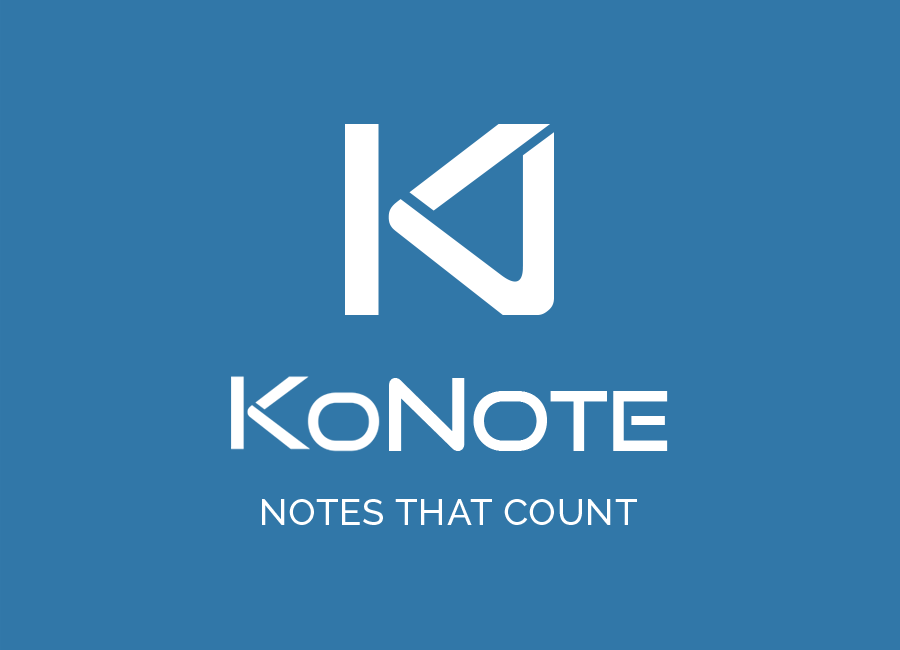
<style>
.page{position:relative;width:900px;height:650px;background:#3177a8}
.page>*{position:absolute;margin:0}
.t1{font:83px "GoodTimesRg-Regular";color:#ffffff}
.t2{font:99.6px "GoodTimesRg-Regular";color:#ffffff}
.t3{font:36.8px "Raleway-Medium";letter-spacing:0.025em;color:#ffffff;text-transform:uppercase}
</style>
<div class="page">
<p class="t1" style="left:389px;top:378px;width:279px;height:73px"><span class="t2">N</span>ote</p>
<p class="t3" style="left:262px;top:499px;width:375px;height:26px">Notes that Count</p>
</div>
